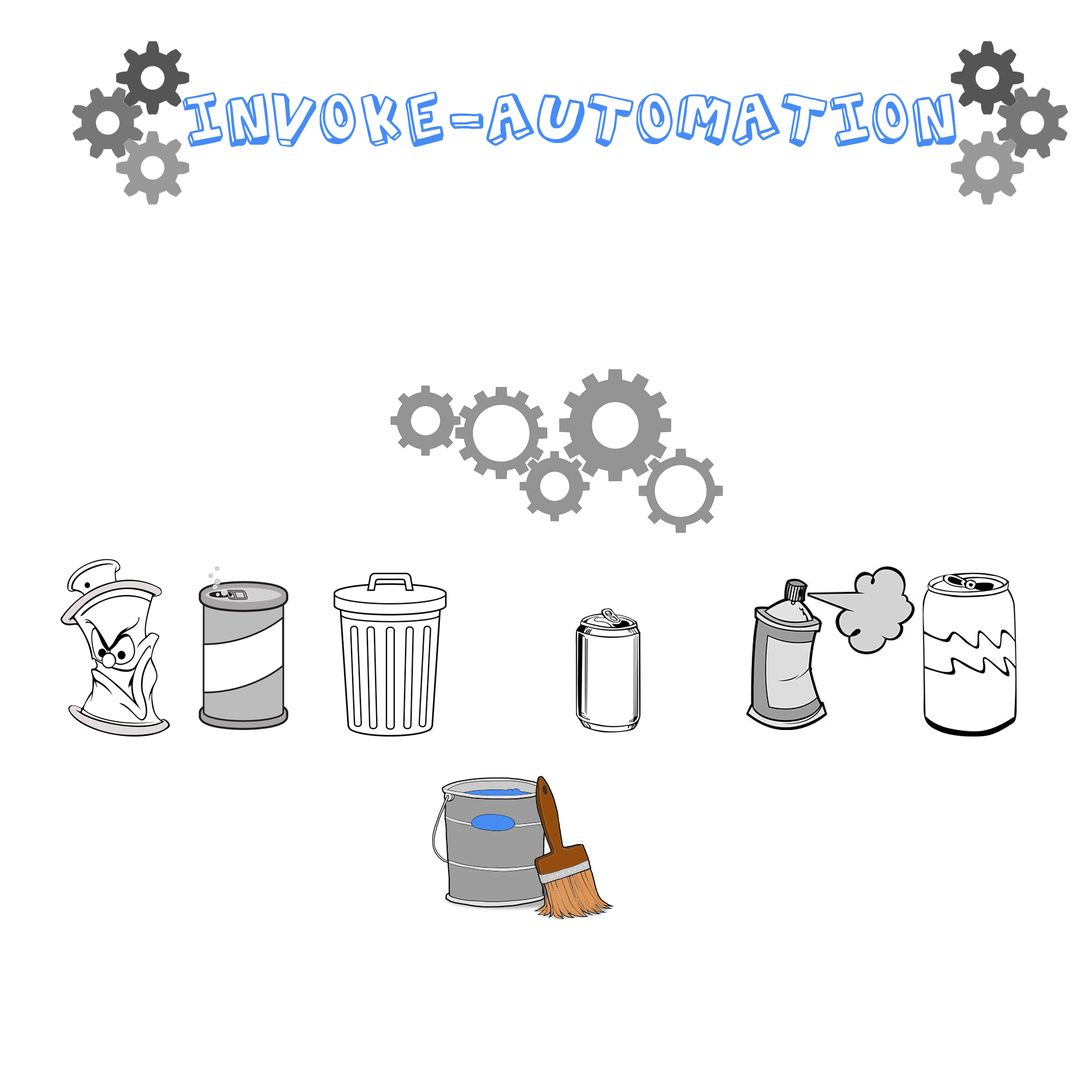
<style>
.page{position:relative;width:1092px;height:1092px;background:#ffffff}
.page>*{position:absolute;margin:0}
.t1{font:69.9px "ActionJackson";color:#478cf4}
</style>
<div class="page">
<p class="t1" style="left:182px;top:92px;width:775px;height:55px">Invoke-Automation</p>
</div>
